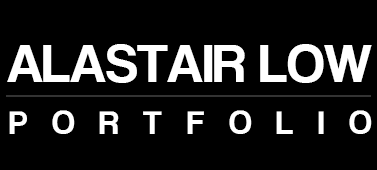
<style>
.page{position:relative;width:377px;height:170px;background:#000000}
.page>*{position:absolute;margin:0}
.t1{font:56.1px "CoolveticaRg-Regular";color:#ffffff}
.t2{font:34.5px "CoolveticaRg-Regular";letter-spacing:0.72em;color:#ffffff}
</style>
<div class="page">
<p class="t1" style="left:7px;top:44px;width:365px;height:39px">ALASTAIR LOW</p>
<p class="t2" style="left:9px;top:110px;width:363px;height:24px">PORTFOLIO</p>
</div>
